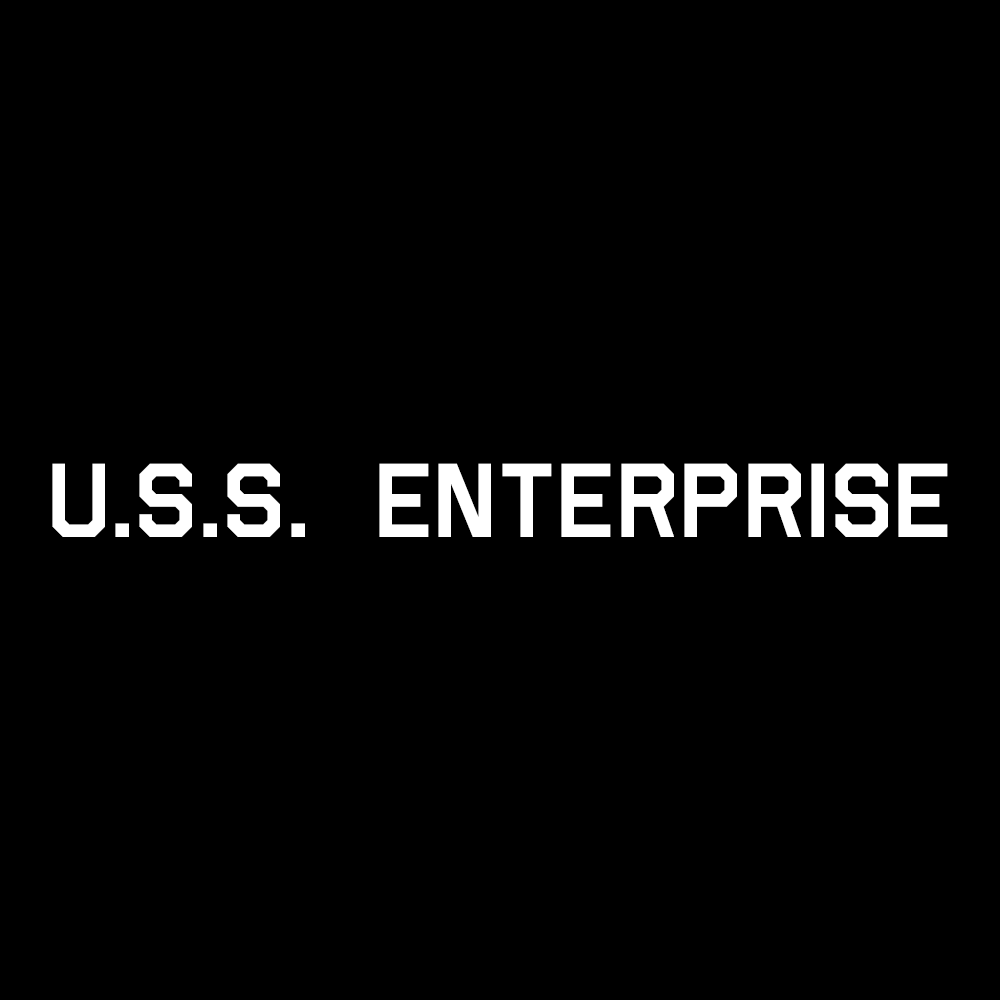
<style>
.page{position:relative;width:1000px;height:1000px;background:#000000}
.page>*{position:absolute;margin:0}
.t1{font:100px "Airborne";color:#ffffff}
</style>
<div class="page">
<p class="t1" style="left:52px;top:463px;width:896px;height:74px">U.S.S.  ENTERPRISE</p>
</div>
